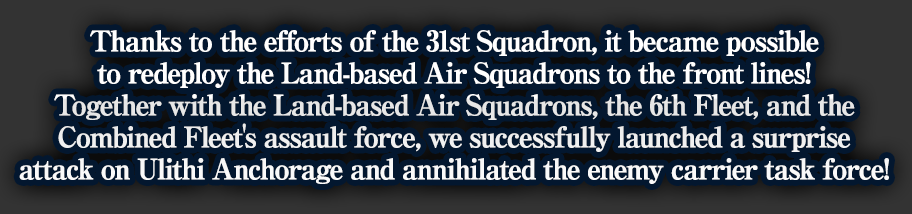
<style>
.page{position:relative;width:912px;height:214px;background:#03172f}
.page>*{position:absolute;margin:0}
.t1{font:28px/32px "RyuminPro-ExBold";letter-spacing:-0.08em;color:#ffffff;font-weight:bold}
</style>
<div class="page">
<p class="t1" style="left:19px;top:30px;width:870px;height:154px;text-align:center">Thanks to the efforts of the 31st Squadron, it became possible<br>to redeploy the Land-based Air Squadrons to the front lines!<br>Together with the Land-based Air Squadrons, the 6th Fleet, and the<br>Combined Fleet's assault force, we successfully launched a surprise<br>attack on Ulithi Anchorage and annihilated the enemy carrier task force!</p>
</div>
